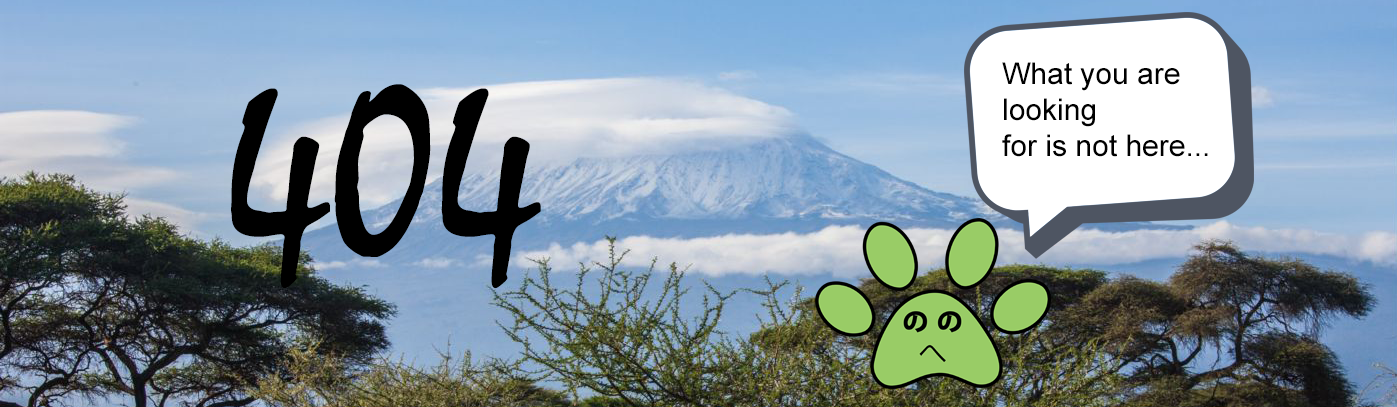
<style>
.page{position:relative;width:1397px;height:407px}
.page>*{position:absolute;margin:0}
.t1{font:30px "ArialMT";color:#000000}
.t2{font:250px "Mistral";color:#000000}
</style>
<div class="page">
<p class="t1" style="left:1002px;top:62px;width:206px;height:95px">What you are<br>looking <br>for is not here...</p>
<p class="t2" style="left:231px;top:84px;width:310px;height:204px">404</p>
</div>
